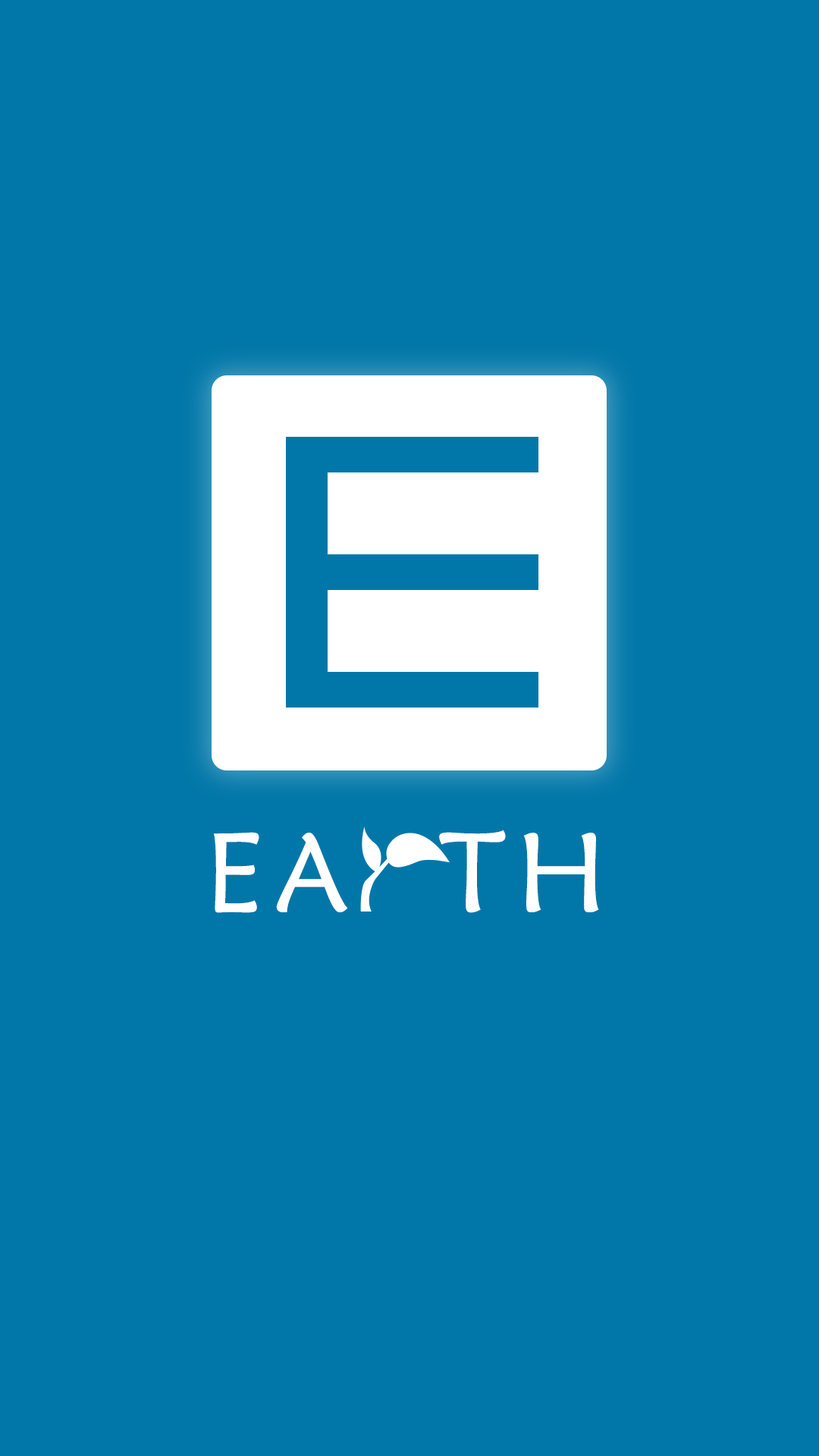
<style>
.page{position:relative;width:819px;height:1456px;background:#0177a9}
.page>*{position:absolute;margin:0}
.t1{font:112.7px "STXinwei";letter-spacing:0.1em;color:#ffffff}
</style>
<div class="page">
<p class="t1" style="left:214px;top:830px;width:385px;height:83px">EA  TH</p>
</div>
